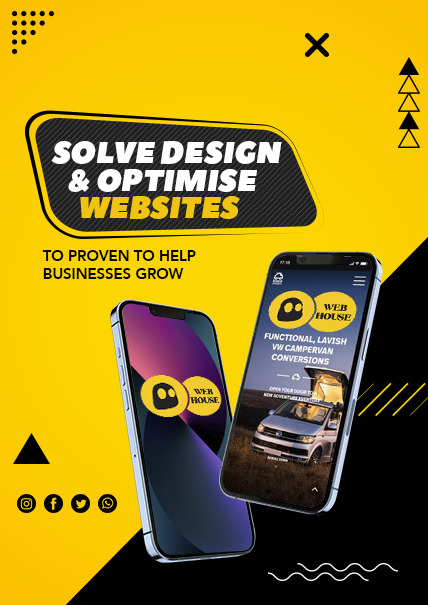
<style>
.page{position:relative;width:428px;height:605px}
.page>*{position:absolute;margin:0}
.t1{font:30.2px/28px "PeaceSans";color:#ffffff;text-transform:uppercase}
.t2{font:30.2px/28px "PeaceSans";color:#f1c40f;text-transform:uppercase}
.t3{font:14.8px "Avenir-Heavy";color:#000000;text-transform:uppercase}
</style>
<div class="page">
<p class="t1" style="left:51px;top:141px;width:231px;height:78px;text-align:center">Solve design<br>&amp; optimise<br><span class="t2">websites</span></p>
<p class="t3" style="left:42px;top:250px;width:154px;height:29px">To proven to help<br>businesses grow</p>
</div>
